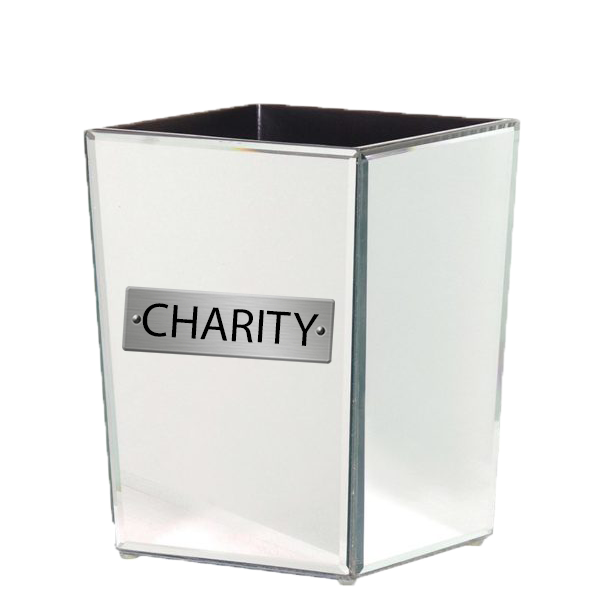
<style>
.page{position:relative;width:600px;height:600px;background:#ffffff}
.page>*{position:absolute;margin:0}
.t1{font:48px "MyriadPro-Regular";color:#000000}
</style>
<div class="page">
<p class="t1" style="left:142px;top:303px;width:177px;height:43px;rotate:4deg">CHARITY</p>
</div>
